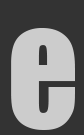
<style>
.page{position:relative;width:84px;height:135px;background:#333333}
.page>*{position:absolute;margin:0}
.t1{font:150.9px "Impact";color:#cccccc;scale:0.93 1}
</style>
<div class="page">
<p class="t1" style="left:11px;top:28px;width:64px;height:102px">e</p>
</div>
